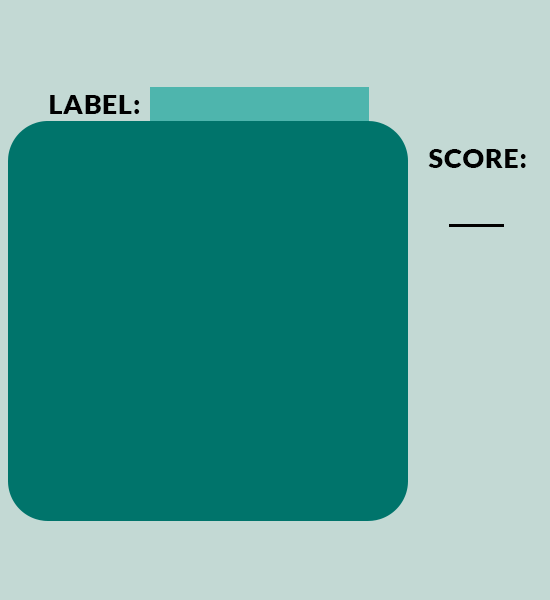
<style>
.page{position:relative;width:550px;height:600px;background:#c3d9d4}
.page>*{position:absolute;margin:0}
.t1{font:27.2px "Lato-Black";letter-spacing:0.02em;color:#000000}
</style>
<div class="page">
<p class="t1" style="left:50px;top:95px;width:90px;height:19px">LABEL:</p>
<p class="t1" style="left:428px;top:149px;width:98px;height:19px">SCORE:</p>
</div>
